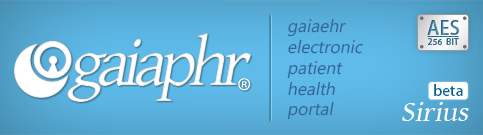
<style>
.page{position:relative;width:483px;height:135px}
.page>*{position:absolute;margin:0}
.t1{font:17.5px "Ebrima";color:#336699;font-style:italic}
.t2{font:18.8px "KozGoPro-Medium"}
.t3{font:69.2px "GentiumBasic";letter-spacing:-0.1em;color:#ffffff;font-style:italic}
.t4{font:8.3px "KozGoPro-Medium";letter-spacing:0.02em;color:#39718d}
.t5{font:14.6px "KozGoPr6N-Medium";color:#006699}
.t6{font:29.1px "GentiumBasic";color:#ffffff;font-style:italic}
</style>
<div class="page">
<p class="t1" style="left:287px;top:19px;width:76px;height:101px">gaiaehr <br>electronic<br>patient<br>health<br>portal</p>
<p class="t2" style="left:427px;top:20px;width:32px;height:15px">AES</p>
<p class="t3" style="left:98px;top:39px;width:67px;height:47px">aia</p>
<p class="t3" style="left:156px;top:33px;width:95px;height:68px">phr</p>
<p class="t4" style="left:428px;top:38px;width:31px;height:7px">256  BIT</p>
<p class="t3" style="left:67px;top:53px;width:41px;height:49px">g</p>
<p class="t5" style="left:434px;top:84px;width:29px;height:12px">beta</p>
<p class="t6" style="left:402px;top:102px;width:67px;height:19px">Sirius</p>
</div>
